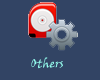
<style>
.page{position:relative;width:100px;height:80px;background:#324464}
.page>*{position:absolute;margin:0}
.t1{font:12px "VinerHandITC";color:#95feee}
</style>
<div class="page">
<p class="t1" style="left:31px;top:57px;width:32px;height:12px">Others</p>
</div>
